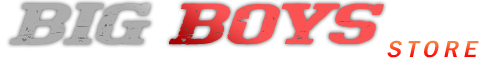
<style>
.page{position:relative;width:489px;height:68px;background:#ffffff}
.page>*{position:absolute;margin:0}
.t1{font:60px "BigboyOTFifty-Regular";letter-spacing:0.005em;text-transform:uppercase;font-style:italic;scale:2 1}
.t2{font:60px "BigboyOTFifty-Regular";text-transform:uppercase;font-style:italic;scale:2 1}
.t3{font:24px "FranklinGothic-MediumCond";letter-spacing:0.2em;text-transform:uppercase;font-style:italic;scale:1.2 1}
.t4{font:48px "BigboyOT-Regular";letter-spacing:0.1em;text-transform:uppercase;scale:1.2 1}
</style>
<div class="page">
<p class="t1" style="left:9px;top:3px;width:375px;height:42px"><span class="t2">Big </span>Boys</p>
<p class="t3" style="left:387px;top:40px;width:92px;height:18px"><span class="t4"><br></span>STORE</p>
</div>
